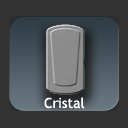
<style>
.page{position:relative;width:128px;height:128px;background:#333333}
.page>*{position:absolute;margin:0}
.t1{font:14px "TrebuchetMS";color:#ffffff}
</style>
<div class="page">
<p class="t1" style="left:44px;top:97px;width:41px;height:12px">Cristal</p>
</div>
